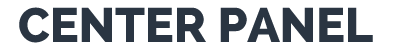
<style>
.page{position:relative;width:400px;height:50px;background:#ffffff}
.page>*{position:absolute;margin:0}
.t1{font:48px "Raleway-ExtraBold";color:#2a3542}
</style>
<div class="page">
<p class="t1" style="left:19px;top:7px;width:354px;height:36px">CENTER PANEL</p>
</div>
